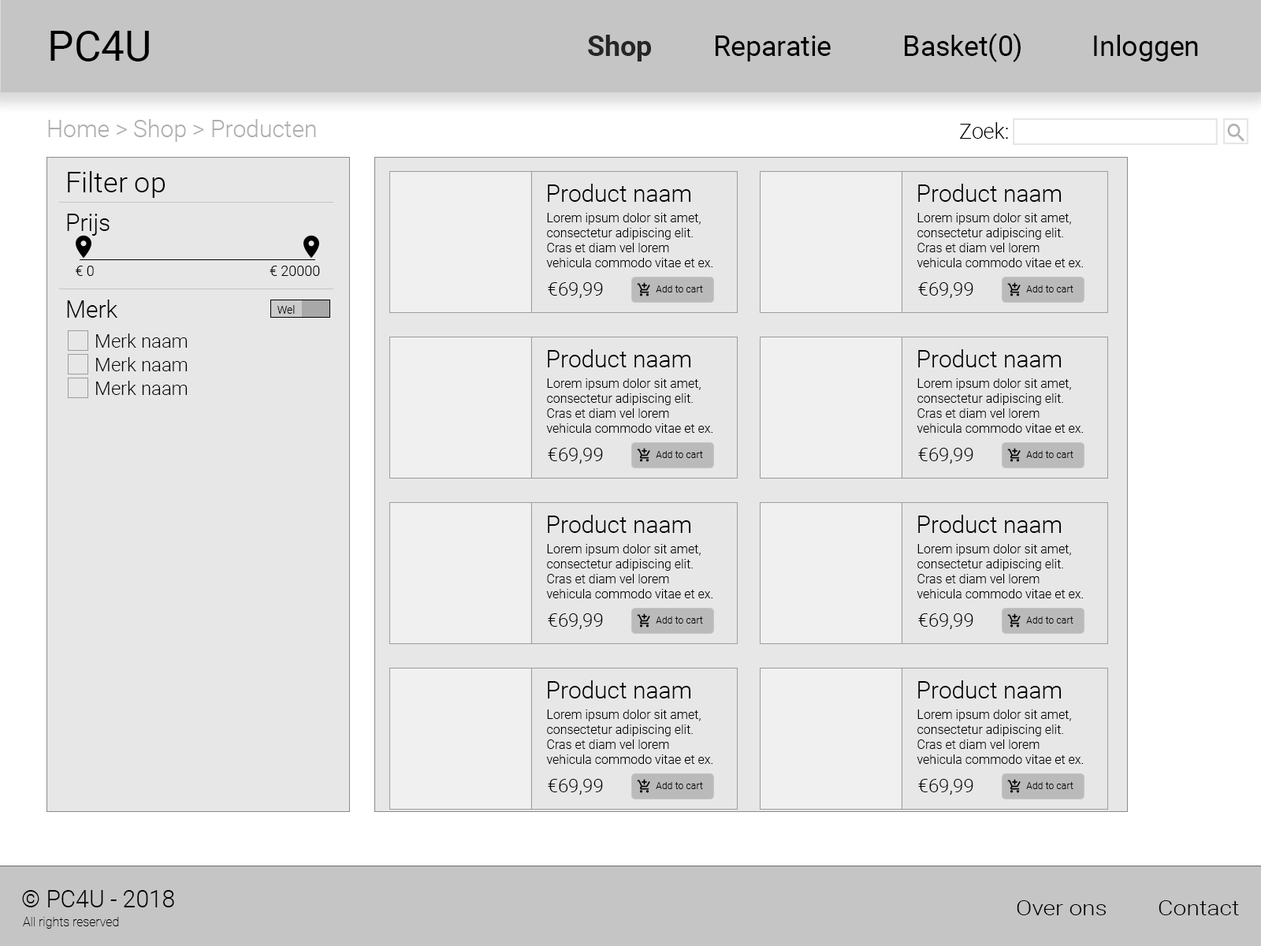
<style>
.page{position:relative;width:1261px;height:946px;background:#e7e7e7}
.page>*{position:absolute;margin:0}
.t1{font:42px "Roboto-Regular";color:#000000}
.t2{font:28px "Roboto-Regular";color:#000000}
.t3{font:28px "Roboto-Bold";color:#262626}
.t4{font:23.6px "Roboto-Light";color:#afafaf}
.t5{font:21px "Roboto-Light";color:#000000}
.t6{font:28.4px "Roboto-Light";color:#000000}
.t7{font:23.6px "Roboto-Light";color:#000000}
.t8{font:12.6px "Roboto-Light";color:#000000}
.t9{font:14.2px "Roboto-Light";color:#000000}
.t10{font:18.9px "Roboto-Light";color:#000000}
.t11{font:9.8px "Roboto-Light";color:#000000}
.t12{font:11px "Roboto-Light";color:#000000}
.t13{font:20.4px "Roboto-Light";color:#000000;scale:1.16 1}
.t14{font:12.6px "Roboto-Thin";color:#000000}
</style>
<div class="page">
<p class="t1" style="left:50px;top:31px;width:99px;height:30px">PC4U</p>
<p class="t2" style="left:588px;top:33px;width:610px;height:29px"><span class="t3">Shop</span>  Reparatie   Basket(0)   Inloggen</p>
<p class="t4" style="left:48px;top:119px;width:268px;height:23px">Home &gt; Shop &gt; Producten</p>
<p class="t5" style="left:960px;top:122px;width:48px;height:17px">Zoek:</p>
<p class="t6" style="left:68px;top:171px;width:97px;height:27px">Filter op</p>
<p class="t7" style="left:548px;top:184px;width:143px;height:18px">Product naam</p>
<p class="t7" style="left:918px;top:184px;width:144px;height:18px">Product naam</p>
<p class="t7" style="left:67px;top:214px;width:43px;height:22px">Prijs</p>
<p class="t8" style="left:546px;top:213px;width:167px;height:54px">Lorem ipsum dolor sit amet, <br>consectetur adipiscing elit. <br>Cras et diam vel lorem <br>vehicula commodo vitae et ex.</p>
<p class="t8" style="left:917px;top:213px;width:167px;height:54px">Lorem ipsum dolor sit amet, <br>consectetur adipiscing elit. <br>Cras et diam vel lorem <br>vehicula commodo vitae et ex.</p>
<p class="t9" style="left:76px;top:266px;width:18px;height:10px">€ 0</p>
<p class="t9" style="left:270px;top:266px;width:50px;height:10px">€ 20000</p>
<p class="t10" style="left:548px;top:282px;width:55px;height:17px">€69,99</p>
<p class="t11" style="left:656px;top:285px;width:47px;height:7px">Add to cart</p>
<p class="t10" style="left:918px;top:282px;width:55px;height:17px">€69,99</p>
<p class="t11" style="left:1026px;top:285px;width:47px;height:7px">Add to cart</p>
<p class="t7" style="left:67px;top:299px;width:51px;height:19px">Merk</p>
<p class="t12" style="left:277px;top:305px;width:18px;height:9px">Wel</p>
<p class="t10" style="left:96px;top:333px;width:92px;height:15px">Merk naam</p>
<p class="t7" style="left:548px;top:349px;width:143px;height:18px">Product naam</p>
<p class="t7" style="left:918px;top:349px;width:144px;height:18px">Product naam</p>
<p class="t10" style="left:96px;top:357px;width:92px;height:14px">Merk naam</p>
<p class="t10" style="left:96px;top:381px;width:92px;height:14px">Merk naam</p>
<p class="t8" style="left:546px;top:378px;width:167px;height:55px">Lorem ipsum dolor sit amet, <br>consectetur adipiscing elit. <br>Cras et diam vel lorem <br>vehicula commodo vitae et ex.</p>
<p class="t8" style="left:917px;top:378px;width:167px;height:55px">Lorem ipsum dolor sit amet, <br>consectetur adipiscing elit. <br>Cras et diam vel lorem <br>vehicula commodo vitae et ex.</p>
<p class="t10" style="left:548px;top:448px;width:55px;height:16px">€69,99</p>
<p class="t10" style="left:918px;top:448px;width:55px;height:16px">€69,99</p>
<p class="t11" style="left:656px;top:451px;width:47px;height:7px">Add to cart</p>
<p class="t11" style="left:1026px;top:451px;width:47px;height:7px">Add to cart</p>
<p class="t7" style="left:548px;top:515px;width:143px;height:18px">Product naam</p>
<p class="t7" style="left:918px;top:515px;width:144px;height:18px">Product naam</p>
<p class="t8" style="left:546px;top:544px;width:167px;height:54px">Lorem ipsum dolor sit amet, <br>consectetur adipiscing elit. <br>Cras et diam vel lorem <br>vehicula commodo vitae et ex.</p>
<p class="t8" style="left:917px;top:544px;width:167px;height:54px">Lorem ipsum dolor sit amet, <br>consectetur adipiscing elit. <br>Cras et diam vel lorem <br>vehicula commodo vitae et ex.</p>
<p class="t10" style="left:548px;top:613px;width:55px;height:17px">€69,99</p>
<p class="t11" style="left:656px;top:616px;width:47px;height:7px">Add to cart</p>
<p class="t10" style="left:918px;top:613px;width:55px;height:17px">€69,99</p>
<p class="t11" style="left:1026px;top:616px;width:47px;height:7px">Add to cart</p>
<p class="t7" style="left:548px;top:680px;width:143px;height:18px">Product naam</p>
<p class="t7" style="left:918px;top:680px;width:144px;height:18px">Product naam</p>
<p class="t8" style="left:546px;top:709px;width:167px;height:55px">Lorem ipsum dolor sit amet, <br>consectetur adipiscing elit. <br>Cras et diam vel lorem <br>vehicula commodo vitae et ex.</p>
<p class="t8" style="left:917px;top:709px;width:167px;height:55px">Lorem ipsum dolor sit amet, <br>consectetur adipiscing elit. <br>Cras et diam vel lorem <br>vehicula commodo vitae et ex.</p>
<p class="t10" style="left:548px;top:779px;width:55px;height:16px">€69,99</p>
<p class="t11" style="left:656px;top:782px;width:47px;height:7px">Add to cart</p>
<p class="t10" style="left:918px;top:779px;width:55px;height:16px">€69,99</p>
<p class="t11" style="left:1026px;top:782px;width:47px;height:7px">Add to cart</p>
<p class="t7" style="left:22px;top:890px;width:152px;height:17px">© PC4U - 2018</p>
<p class="t13" style="left:1017px;top:900px;width:222px;height:15px">Over ons  Contact</p>
<p class="t14" style="left:23px;top:917px;width:96px;height:11px">All rights reserved</p>
</div>
